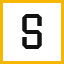
<style>
.page{position:relative;width:64px;height:64px;background:#ffffff}
.page>*{position:absolute;margin:0}
.t1{font:48px "Ö£Çì¿Æ»ÆÓÍÌåRegular";color:#111111}
</style>
<div class="page">
<p class="t1" style="left:22px;top:14px;width:20px;height:35px">S</p>
</div>
